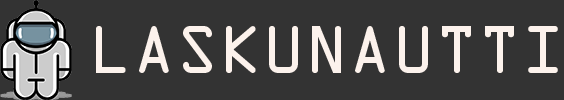
<style>
.page{position:relative;width:564px;height:100px;background:#333333}
.page>*{position:absolute;margin:0}
.t1{font:60px "OCRAStd";color:#fcf2ec}
</style>
<div class="page">
<p class="t1" style="left:96px;top:26px;width:462px;height:47px">LASKUNAUTTI</p>
</div>
